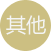
<style>
.page{position:relative;width:51px;height:51px;background:#ccbf82}
.page>*{position:absolute;margin:0}
.t1{font:20px "MicrosoftYaHei";color:#f3f4f3}
</style>
<div class="page">
<p class="t1" style="left:6px;top:15px;width:40px;height:20px">其他</p>
</div>
